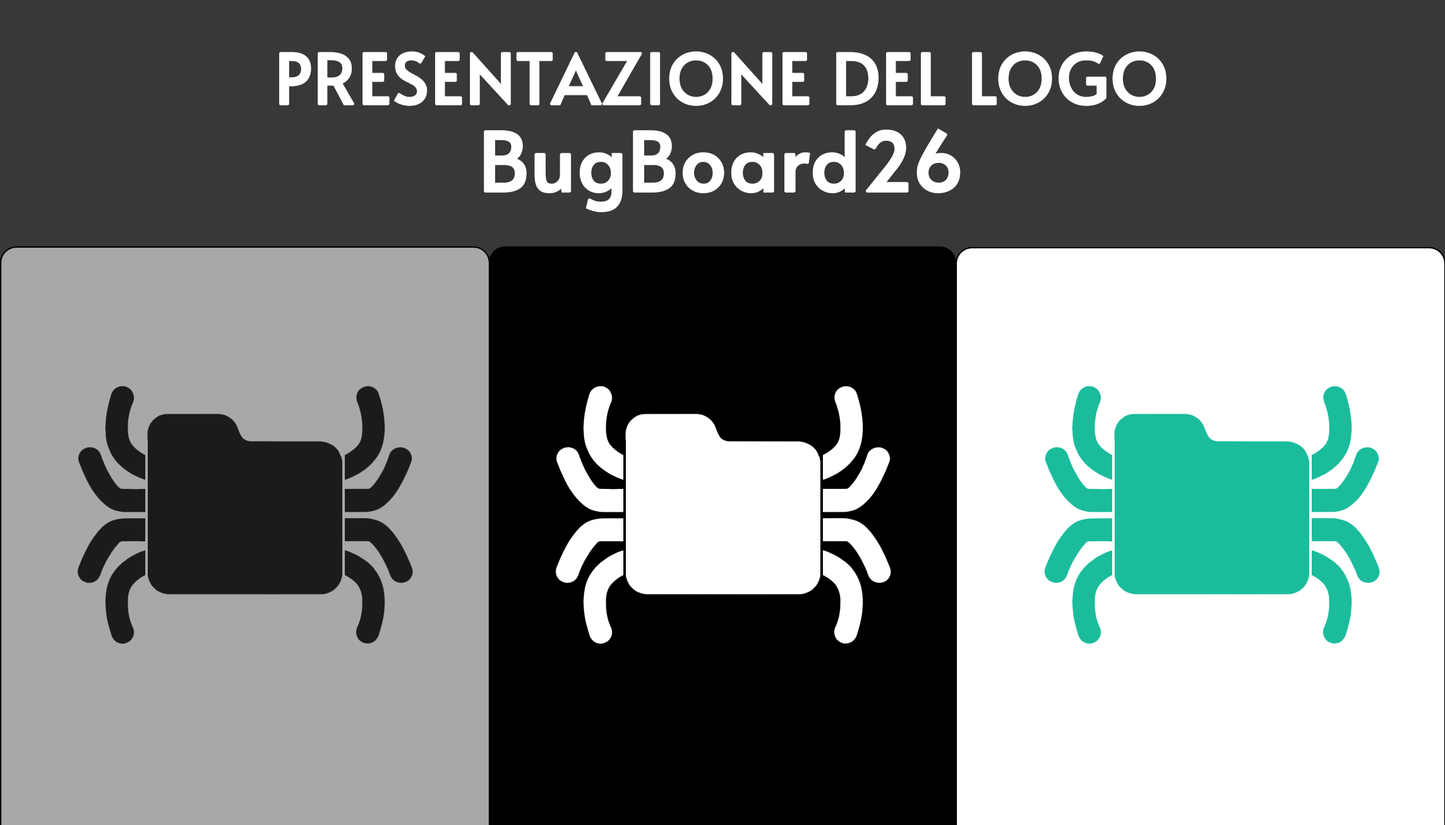
<style>
.page{position:relative;width:1445px;height:825px;background:#383838}
.page>*{position:absolute;margin:0}
.t1{font:70.1px/87.2px "Alata-Regular";color:#ffffff;font-weight:bold}
.t2{font:81.5px/87.2px "Alata-Regular";color:#ffffff;font-weight:bold}
</style>
<div class="page">
<p class="t1" style="left:279px;top:51px;width:888px;height:161px;text-align:center">PRESENTAZIONE DEL LOGO<br><span class="t2">BugBoard26</span></p>
</div>
